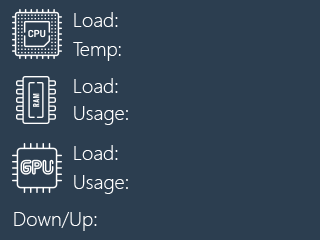
<style>
.page{position:relative;width:320px;height:240px;background:#2c3e50}
.page>*{position:absolute;margin:0}
.t1{font:20px "SegoeUI-Light";color:#f7f7f7}
</style>
<div class="page">
<p class="t1" style="left:74px;top:12px;width:44px;height:15px">Load:</p>
<p class="t1" style="left:73px;top:42px;width:48px;height:19px">Temp:</p>
<p class="t1" style="left:74px;top:78px;width:44px;height:15px">Load:</p>
<p class="t1" style="left:74px;top:106px;width:54px;height:19px">Usage:</p>
<p class="t1" style="left:74px;top:145px;width:44px;height:15px">Load:</p>
<p class="t1" style="left:74px;top:175px;width:54px;height:19px">Usage:</p>
<p class="t1" style="left:14px;top:212px;width:83px;height:19px">Down/Up:</p>
</div>
